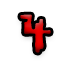
<style>
.page{position:relative;width:71px;height:71px;background:#ffffff}
.page>*{position:absolute;margin:0}
.t1{font:55px "Tipi-Organic"}
</style>
<div class="page">
<p class="t1" style="left:20px;top:14px;width:31px;height:39px">4</p>
</div>
